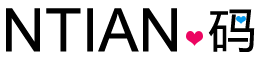
<style>
.page{position:relative;width:260px;height:60px;background:#ffffff}
.page>*{position:absolute;margin:0}
.t1{font:60px "ArialMT";color:#000000}
.t2{font:48px "MicrosoftYaHei";color:#000000}
</style>
<div class="page">
<p class="t1" style="left:6px;top:8px;width:171px;height:44px">NTIAN</p>
<p class="t2" style="left:208px;top:9px;width:47px;height:43px">码</p>
</div>
